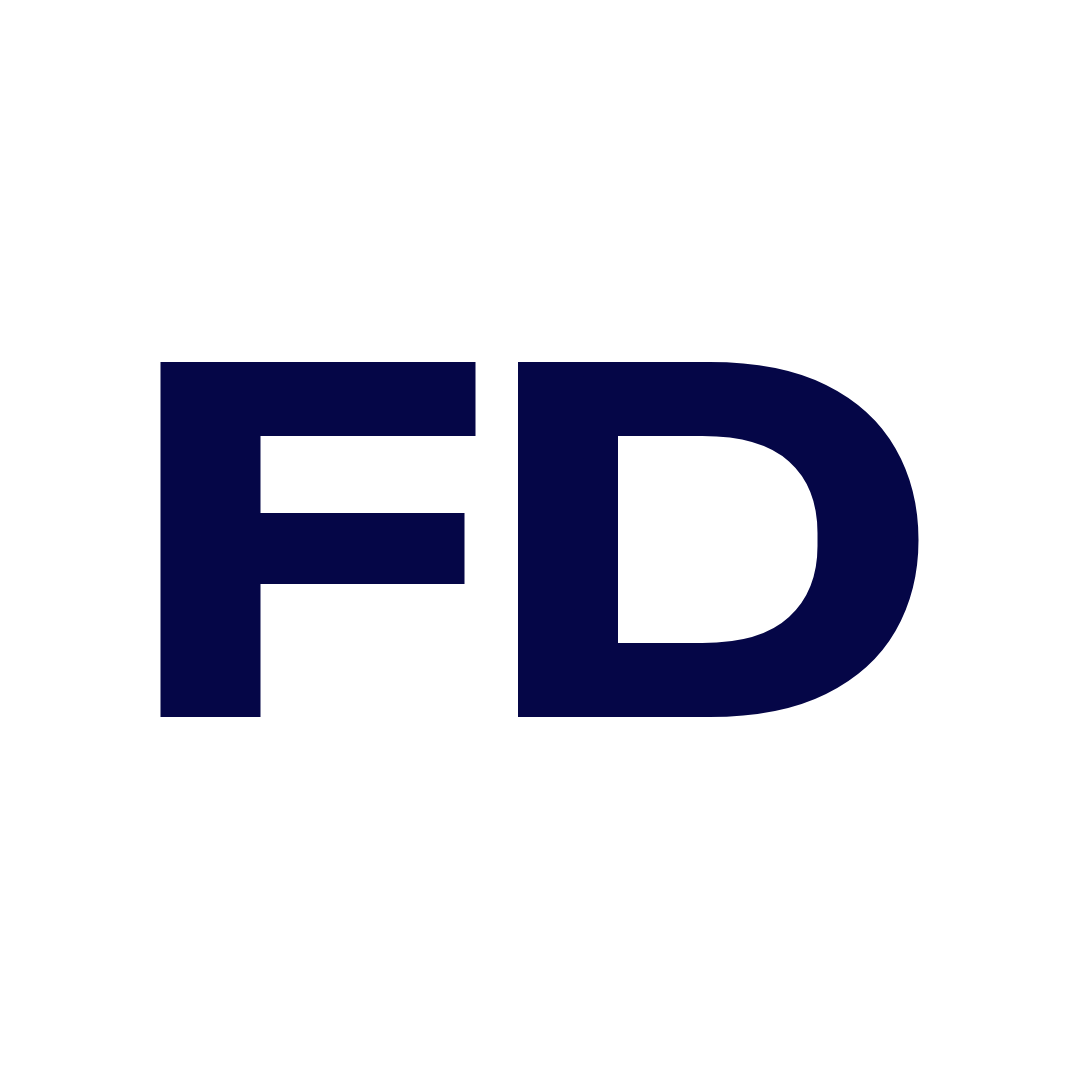
<style>
.page{position:relative;width:1080px;height:1080px;background:#ffffff}
.page>*{position:absolute;margin:0}
.t1{font:500px "SpecialGothicExpandedOne-Regular";color:#050647}
</style>
<div class="page">
<p class="t1" style="left:160px;top:361px;width:759px;height:357px">FD</p>
</div>
